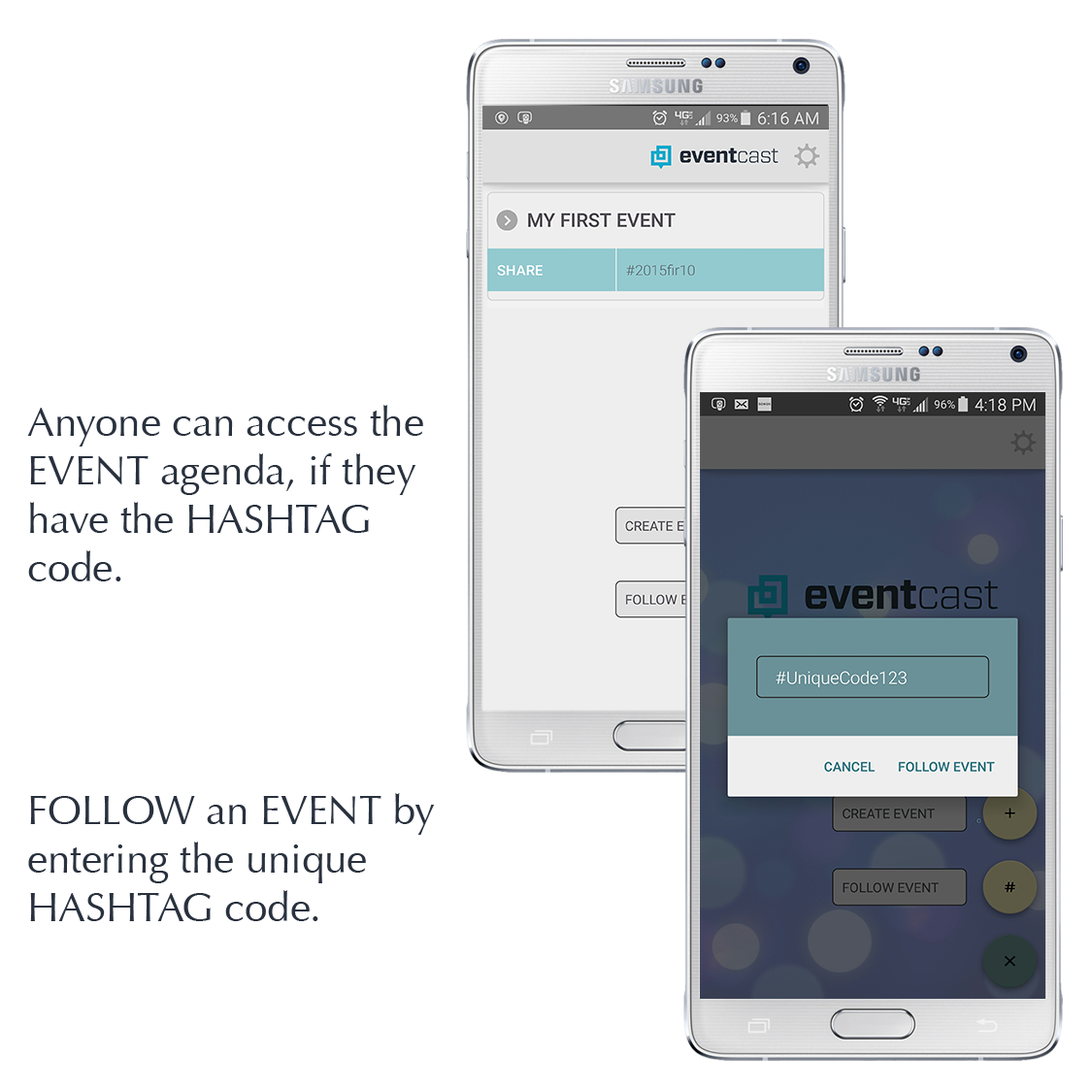
<style>
.page{position:relative;width:1092px;height:1092px;background:#ffffff}
.page>*{position:absolute;margin:0}
.t1{font:40.4px "Optima-Regular";color:#29313e}
</style>
<div class="page">
<p class="t1" style="left:27px;top:405px;width:408px;height:516px">Anyone can access the EVENT agenda, if they have the HASHTAG code.<br><br><br><br><br>FOLLOW an EVENT by entering the unique HASHTAG code.</p>
</div>
